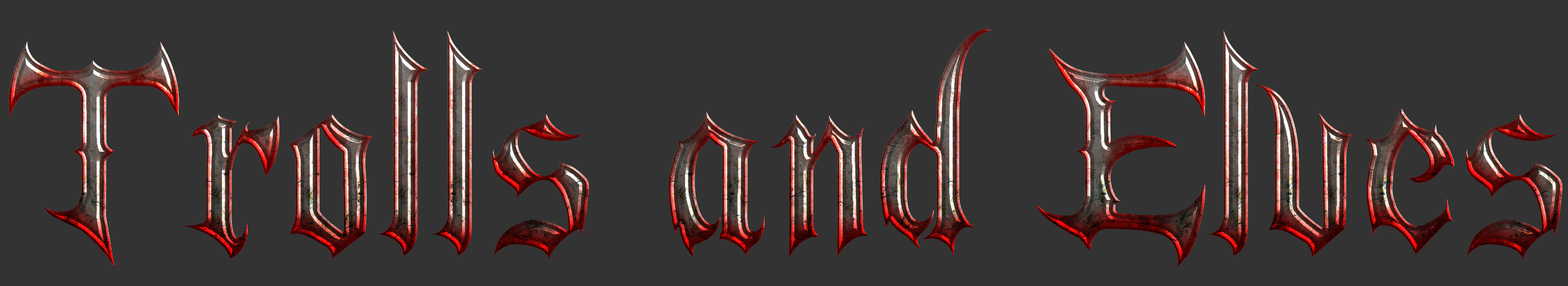
<style>
.page{position:relative;width:1568px;height:286px;background:#333333}
.page>*{position:absolute;margin:0}
.t1{font:241.9px "MirageGothic"}
</style>
<div class="page">
<p class="t1" style="left:9px;top:29px;width:1553px;height:239px">Trolls and Elves</p>
</div>
